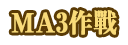
<style>
.page{position:relative;width:128px;height:45px;background:#ffffff}
.page>*{position:absolute;margin:0}
.t1{font:26.2px "RyuminPr6N-ExBold";color:#f9db79;font-weight:bold;scale:0.92 1}
</style>
<div class="page">
<p class="t1" style="left:11px;top:10px;width:106px;height:25px">MA3作戰</p>
</div>
